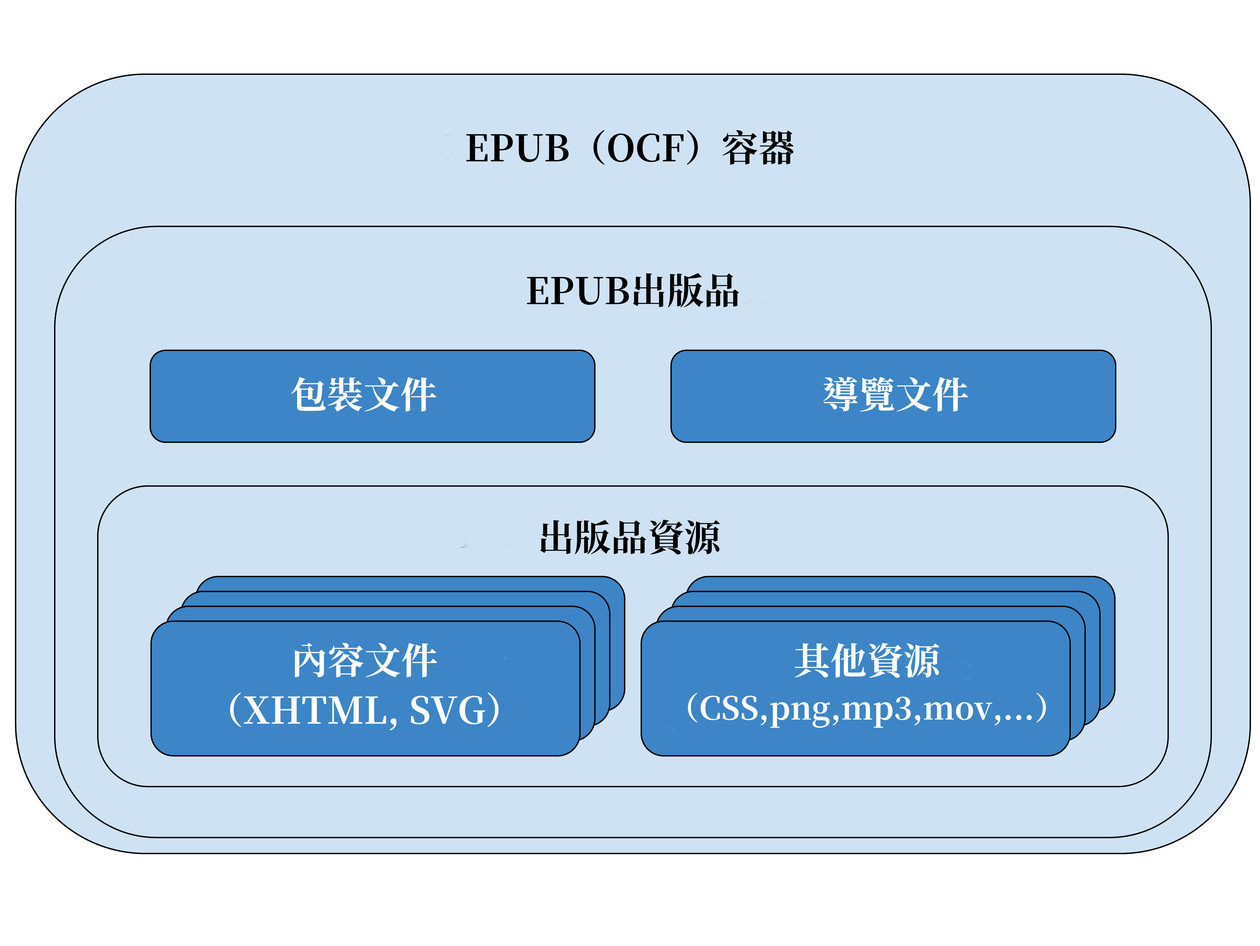
<style>
.page{position:relative;width:1260px;height:946px;background:#cfe2f3}
.page>*{position:absolute;margin:0}
.t1{font:36.7px "SourceHanSerifHCVF-Bold";color:#000000}
.t2{font:36.7px "SourceHanSerifHCVF-Bold";color:#ffffff}
.t3{font:36.7px/49.8px "SourceHanSerifHCVF-Bold";color:#ffffff}
.t4{font:31.4px/49.8px "SourceHanSerifHCVF-Bold";color:#ffffff}
</style>
<div class="page">
<p class="t1" style="left:466px;top:130px;width:328px;height:35px">EPUB（OCF）容器</p>
<p class="t1" style="left:527px;top:273px;width:212px;height:35px">EPUB出版品</p>
<p class="t2" style="left:291px;top:377px;width:146px;height:35px">包裝文件</p>
<p class="t2" style="left:824px;top:376px;width:145px;height:36px">導覽文件</p>
<p class="t1" style="left:540px;top:520px;width:180px;height:35px">出版品資源</p>
<p class="t3" style="left:230px;top:643px;width:269px;height:88px;text-align:center">內容文件<br>（XHTML, SVG）</p>
<p class="t4" style="left:688px;top:643px;width:358px;height:85px;text-align:center"><span class="t3">其他資源<br></span>（CSS,png,mp3,mov,...）</p>
</div>
